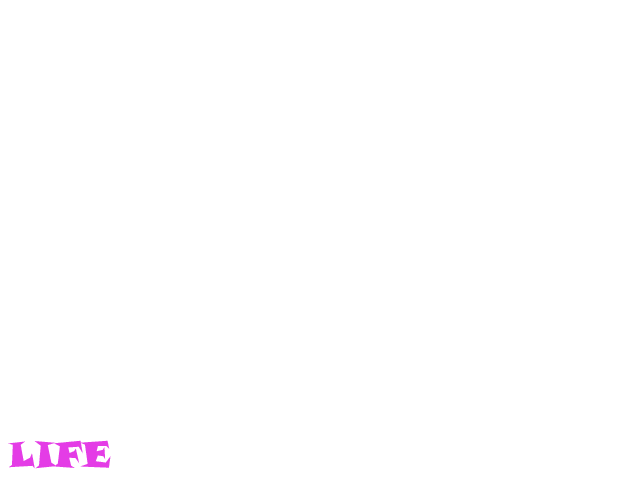
<style>
.page{position:relative;width:640px;height:480px;background:#ffffff}
.page>*{position:absolute;margin:0}
.t1{font:36px "SnapITC-Regular";color:#e43ce6}
</style>
<div class="page">
<p class="t1" style="left:8px;top:440px;width:103px;height:29px">LIFE</p>
</div>
